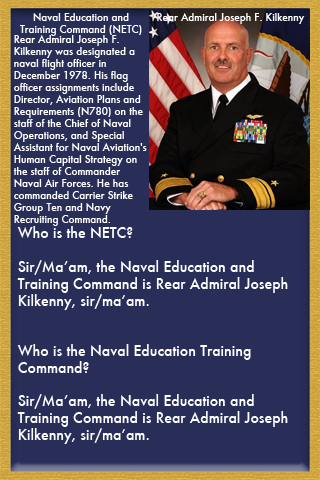
<style>
.page{position:relative;width:320px;height:480px;background:#292e59}
.page>*{position:absolute;margin:0}
.t1{font:10px "Futura-Medium";color:#ffffff}
.t2{font:14px "Futura-Medium";color:#ffffff}
</style>
<div class="page">
<p class="t1" style="left:20px;top:13px;width:122px;height:23px;text-align:center">Naval Education and<br>Training Command (NETC)</p>
<p class="t1" style="left:157px;top:13px;width:148px;height:11px">Rear Admiral Joseph F. Kilkenny</p>
<p class="t1" style="left:13px;top:35px;width:134px;height:191px">Rear Admiral Joseph F. <br>Kilkenny was designated a <br>naval flight officer in <br>December 1978. His flag <br>officer assignments include <br>Director, Aviation Plans and <br>Requirements (N780) on the <br>staff of the Chief of Naval <br>Operations, and Special <br>Assistant for Naval Aviation's <br>Human Capital Strategy on <br>the staff of Commander <br>Naval Air Forces. He has <br>commanded Carrier Strike <br>Group Ten and Navy <br>Recruiting Command.</p>
<p class="t2" style="left:17px;top:226px;width:271px;height:218px">Who is the NETC?<br><br>Sir/Ma’am, the Naval Education and <br>Training Command is Rear Admiral Joseph <br>Kilkenny, sir/ma’am.<br><br><br>Who is the Naval Education Training <br>Command?<br><br>Sir/Ma’am, the Naval Education and <br>Training Command is Rear Admiral Joseph <br>Kilkenny, sir/ma’am.</p>
</div>
